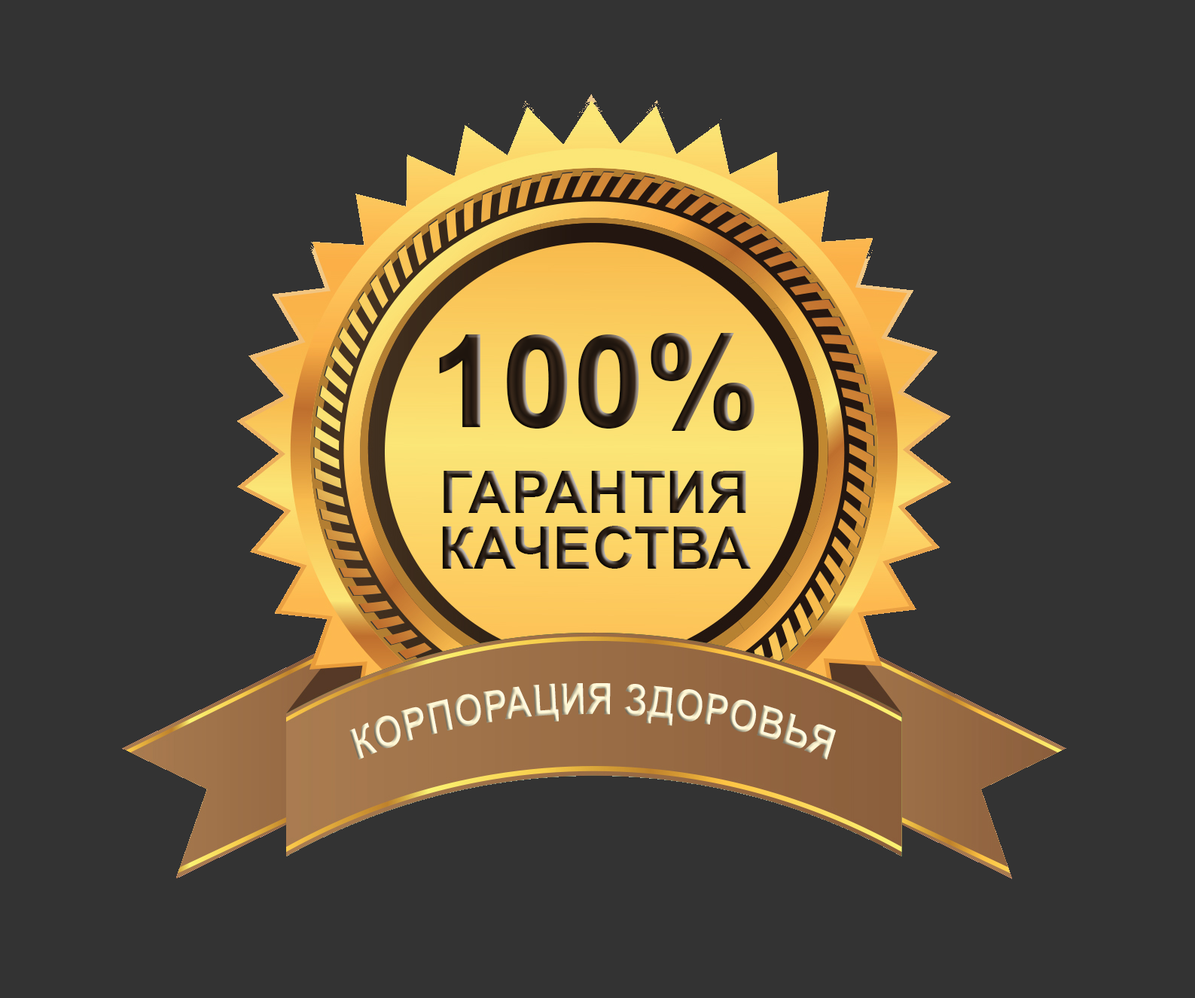
<style>
.page{position:relative;width:1195px;height:998px;background:#333333}
.page>*{position:absolute;margin:0}
.t1{font:129.5px "Arial-BoldMT";color:#2a1d14;text-transform:uppercase}
.t2{font:58.7px/55.7px "Arial-BoldMT";text-transform:uppercase}
.t3{font:43.3px/57.3px "Arial-BoldMT";text-transform:uppercase;scale:0.86 1}
</style>
<div class="page">
<p class="t1" style="left:439px;top:333px;width:316px;height:98px">100%</p>
<p class="t2" style="left:442px;top:471px;width:309px;height:98px;text-align:center">гарантия<br>качества</p>
<p class="t3" style="left:349px;top:683px;width:487px;height:77px;text-align:center">корпорация здоровья</p>
</div>
